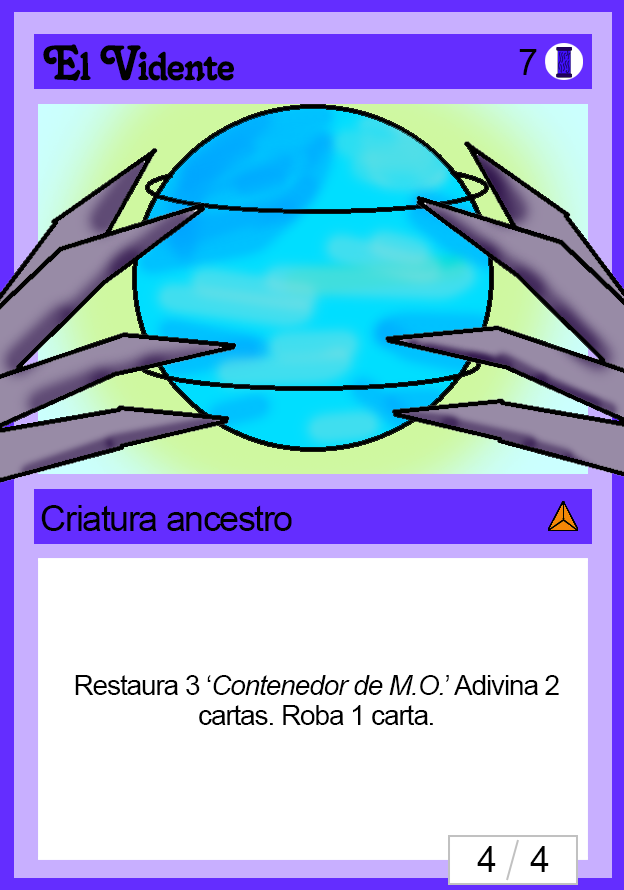
<style>
.page{position:relative;width:624px;height:890px;background:#ffffff}
.page>*{position:absolute;margin:0}
.t1{font:48px "Salina";letter-spacing:-0.04em;color:#000000}
.t2{font:36px "ArialMT";letter-spacing:-0.04em;color:#000000}
.t3{font:28px/30px "ArialMT";letter-spacing:-0.04em;color:#000000}
.t4{font:28px/30px "Arial-ItalicMT";letter-spacing:-0.04em;color:#000000}
</style>
<div class="page">
<p class="t1" style="left:43px;top:44px;width:191px;height:37px">El Vidente</p>
<p class="t2" style="left:519px;top:49px;width:18px;height:26px">7</p>
<p class="t2" style="left:41px;top:505px;width:251px;height:26px">Criatura ancestro</p>
<p class="t3" style="left:75px;top:675px;width:484px;height:50px;text-align:center">Restaura 3 ‘<span class="t4">Contenedor de M.O.</span>’ Adivina 2 cartas. Roba 1 carta.</p>
<p class="t2" style="left:477px;top:846px;width:72px;height:26px">4    4</p>
</div>
